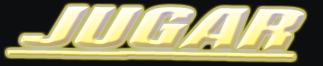
<style>
.page{position:relative;width:323px;height:66px;background:#0d0e0f}
.page>*{position:absolute;margin:0}
.t1{font:56px "RadiumCorp";scale:2.74 1}
</style>
<div class="page">
<p class="t1" style="left:7px;top:6px;width:298px;height:53px;rotate:1deg">jugar</p>
</div>
